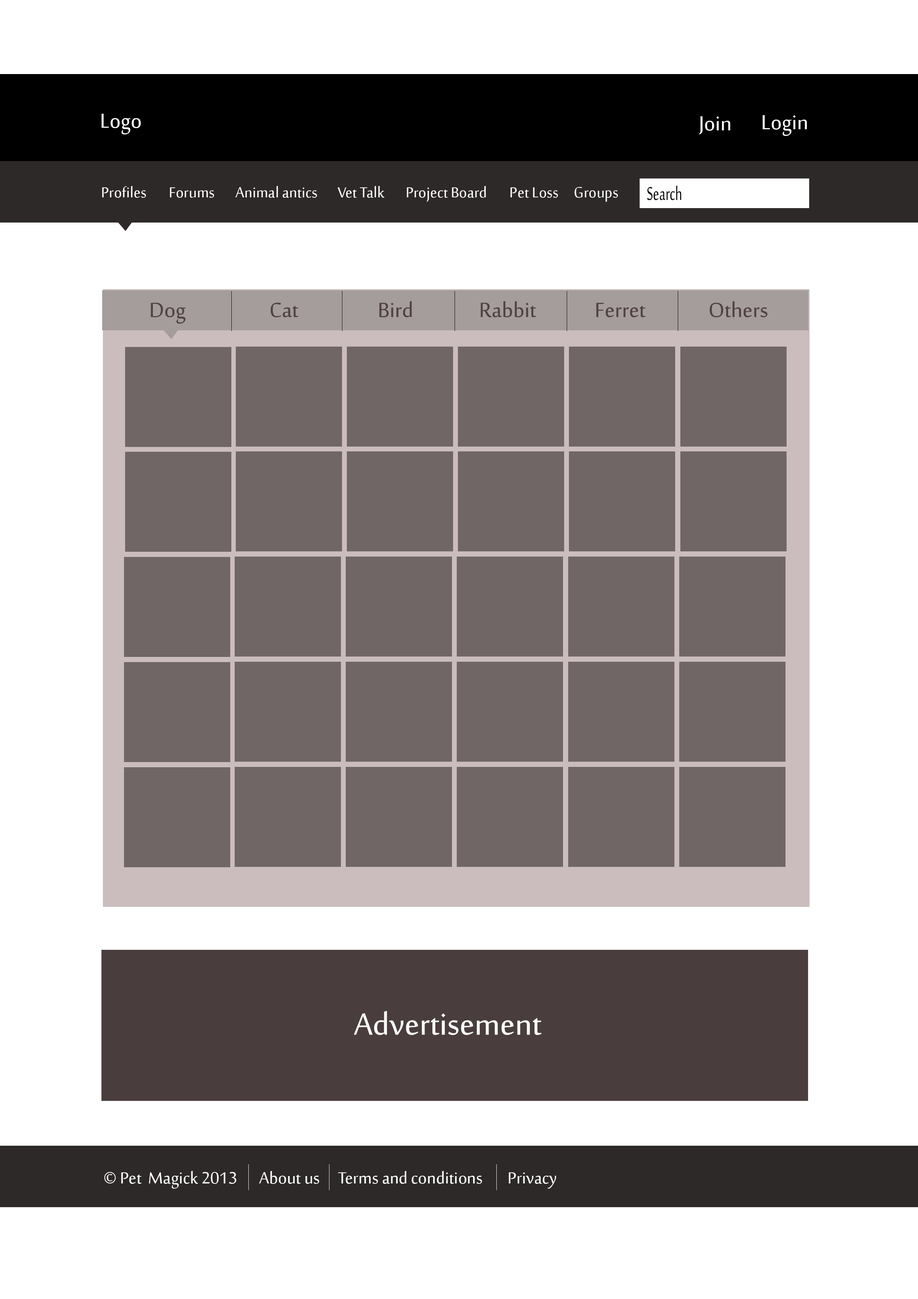
<style>
.page{position:relative;width:918px;height:1299px;background:#ffffff}
.page>*{position:absolute;margin:0}
.t1{font:27.8px "SakkalMajalla";color:#ffffff}
.t2{font:19.8px "SakkalMajalla";color:#ffffff}
.t3{font:25.6px "SakkalMajalla";color:#000000;scale:0.67 1}
.t4{font:28.3px "SakkalMajalla";color:#504342}
.t5{font:41.9px "SakkalMajalla";color:#ffffff}
.t6{font:22.1px "SakkalMajalla";color:#ffffff}
</style>
<div class="page">
<p class="t1" style="left:101px;top:114px;width:40px;height:20px">Logo</p>
<p class="t1" style="left:699px;top:116px;width:31px;height:18px">Join</p>
<p class="t1" style="left:763px;top:115px;width:44px;height:21px">Login</p>
<p class="t2" style="left:102px;top:186px;width:44px;height:12px">Profiles</p>
<p class="t2" style="left:235px;top:186px;width:82px;height:12px">Animal antics</p>
<p class="t2" style="left:338px;top:186px;width:47px;height:12px">Vet Talk</p>
<p class="t2" style="left:407px;top:186px;width:79px;height:16px">Project Board</p>
<p class="t3" style="left:647px;top:185px;width:35px;height:15px">Search</p>
<p class="t2" style="left:170px;top:187px;width:44px;height:11px">Forums</p>
<p class="t2" style="left:511px;top:187px;width:47px;height:11px">Pet Loss</p>
<p class="t2" style="left:575px;top:187px;width:43px;height:15px">Groups</p>
<p class="t4" style="left:151px;top:302px;width:34px;height:22px">Dog</p>
<p class="t4" style="left:271px;top:302px;width:27px;height:15px">Cat</p>
<p class="t4" style="left:379px;top:301px;width:33px;height:16px">Bird</p>
<p class="t4" style="left:481px;top:301px;width:55px;height:16px">Rabbit</p>
<p class="t4" style="left:596px;top:302px;width:50px;height:15px">Ferret</p>
<p class="t4" style="left:710px;top:301px;width:57px;height:16px">Others</p>
<p class="t5" style="left:354px;top:1011px;width:188px;height:24px">Advertisement</p>
<p class="t6" style="left:104px;top:1171px;width:133px;height:17px">© Pet  Magick 2013</p>
<p class="t6" style="left:259px;top:1171px;width:60px;height:13px">About us</p>
<p class="t6" style="left:338px;top:1171px;width:144px;height:13px">Terms and conditions</p>
<p class="t6" style="left:509px;top:1172px;width:47px;height:16px">Privacy</p>
</div>
